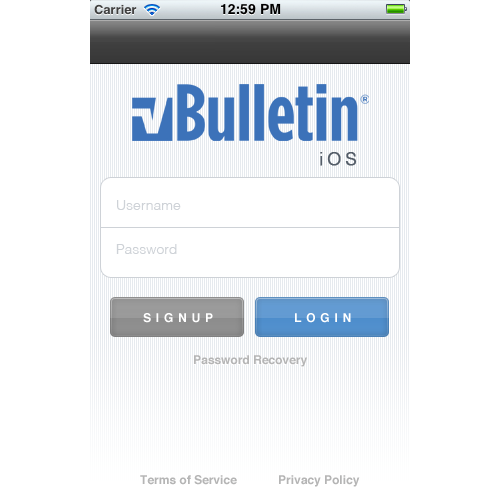
<style>
.page{position:relative;width:500px;height:500px;background:#ffffff}
.page>*{position:absolute;margin:0}
.t1{font:18px "Helvetica-Light";letter-spacing:0.2em;color:#545d68;font-weight:bold}
.t2{font:14px "Helvetica-Light";color:#ced2d7}
.t3{font:12px "Helvetica-Bold";letter-spacing:0.4em;color:#ffffff}
.t4{font:12px "Helvetica-Bold";color:#b5b5b5}
</style>
<div class="page">
<p class="t1" style="left:320px;top:152px;width:37px;height:14px">iOS</p>
<p class="t2" style="left:117px;top:200px;width:64px;height:10px">Username</p>
<p class="t2" style="left:116px;top:244px;width:61px;height:10px">Password</p>
<p class="t3" style="left:143px;top:313px;width:70px;height:10px">SIGNUP</p>
<p class="t3" style="left:295px;top:313px;width:56px;height:10px">LOGIN</p>
<p class="t4" style="left:194px;top:355px;width:113px;height:12px">Password Recovery</p>
<p class="t4" style="left:140px;top:475px;width:97px;height:10px">Terms of Service</p>
<p class="t4" style="left:279px;top:475px;width:81px;height:12px">Privacy Policy</p>
</div>
